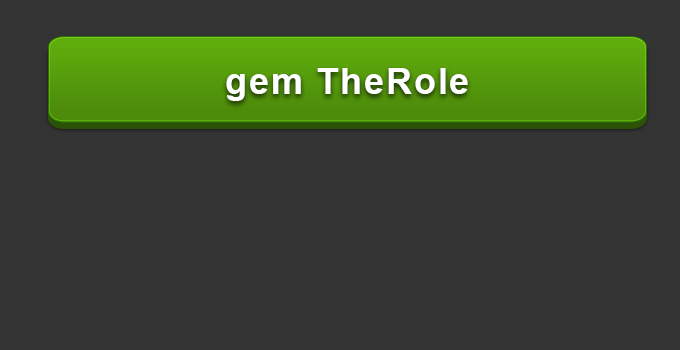
<style>
.page{position:relative;width:680px;height:350px;background:#333333}
.page>*{position:absolute;margin:0}
.t1{font:36px "Arial-BoldMT";letter-spacing:0.05em;color:#ffffff}
</style>
<div class="page">
<p class="t1" style="left:226px;top:68px;width:242px;height:33px">gem TheRole</p>
</div>
